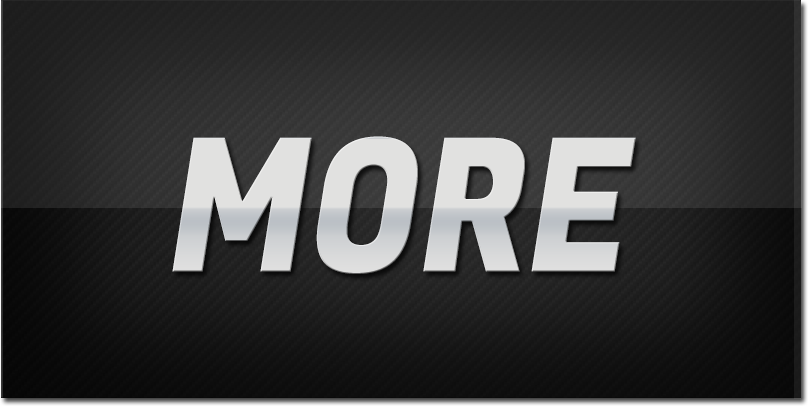
<style>
.page{position:relative;width:808px;height:406px}
.page>*{position:absolute;margin:0}
.t1{font:185.2px "FugazOne-Regular";color:#dfdfdf;scale:0.89 1}
</style>
<div class="page">
<p class="t1" style="left:172px;top:136px;width:464px;height:138px">MORE</p>
</div>
